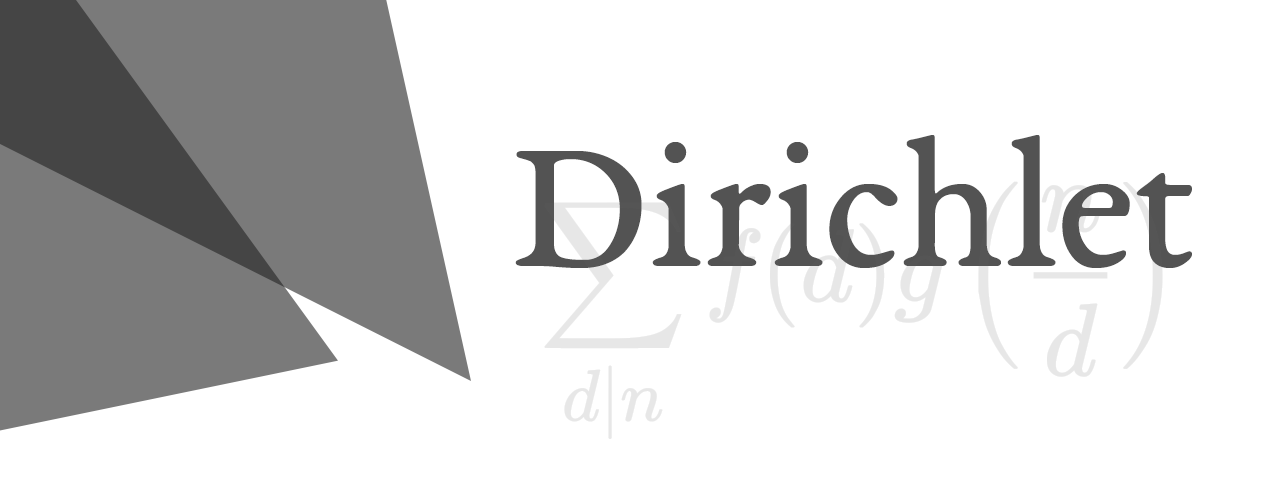
<style>
.page{position:relative;width:1280px;height:500px;background:#ffffff}
.page>*{position:absolute;margin:0}
.t1{font:192.8px "EBGaramond08-Regular";color:#535353}
</style>
<div class="page">
<p class="t1" style="left:515px;top:135px;width:677px;height:133px">Dirichlet</p>
</div>
